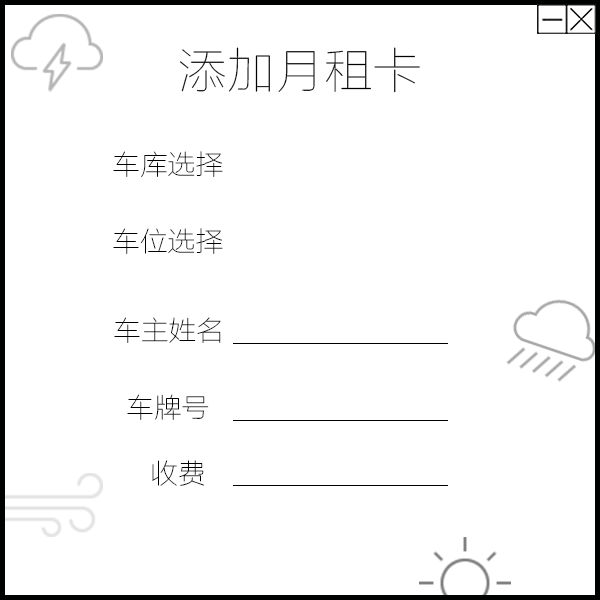
<style>
.page{position:relative;width:600px;height:600px;background:#ffffff}
.page>*{position:absolute;margin:0}
.t1{font:48.7px "FZLTCXHJW--GB1-0";color:#000000}
.t2{font:27.8px "FZLTCXHJW--GB1-0";color:#000000}
</style>
<div class="page">
<p class="t1" style="left:180px;top:47px;width:240px;height:46px">添加月租卡</p>
<p class="t2" style="left:113px;top:151px;width:110px;height:27px">车库选择</p>
<p class="t2" style="left:113px;top:228px;width:110px;height:26px">车位选择</p>
<p class="t2" style="left:114px;top:317px;width:107px;height:26px">车主姓名</p>
<p class="t2" style="left:127px;top:394px;width:82px;height:26px">车牌号</p>
<p class="t2" style="left:152px;top:460px;width:52px;height:26px">收费</p>
</div>
